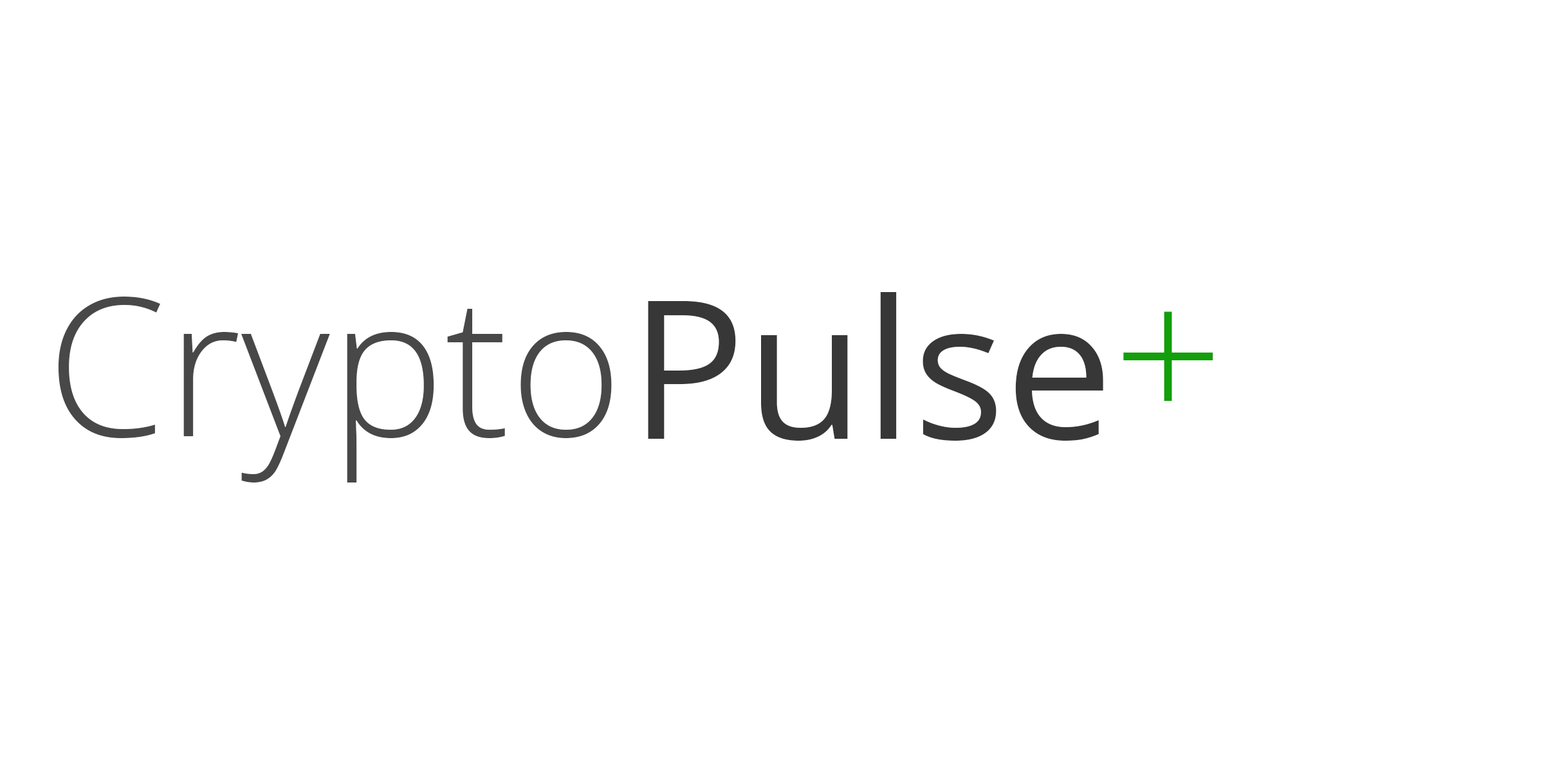
<style>
.page{position:relative;width:1544px;height:772px;background:#ffffff}
.page>*{position:absolute;margin:0}
.t1{font:193px "OpenSans";color:#373737}
.t2{font:193px "OpenSans-Light";color:#484848}
.t3{font:193px "OpenSans-Light";color:#129f0b}
</style>
<div class="page">
<p class="t1" style="left:648px;top:292px;width:456px;height:149px">Pulse</p>
<p class="t2" style="left:58px;top:297px;width:554px;height:186px">Crypto</p>
<p class="t3" style="left:1123px;top:311px;width:91px;height:91px">+</p>
</div>
